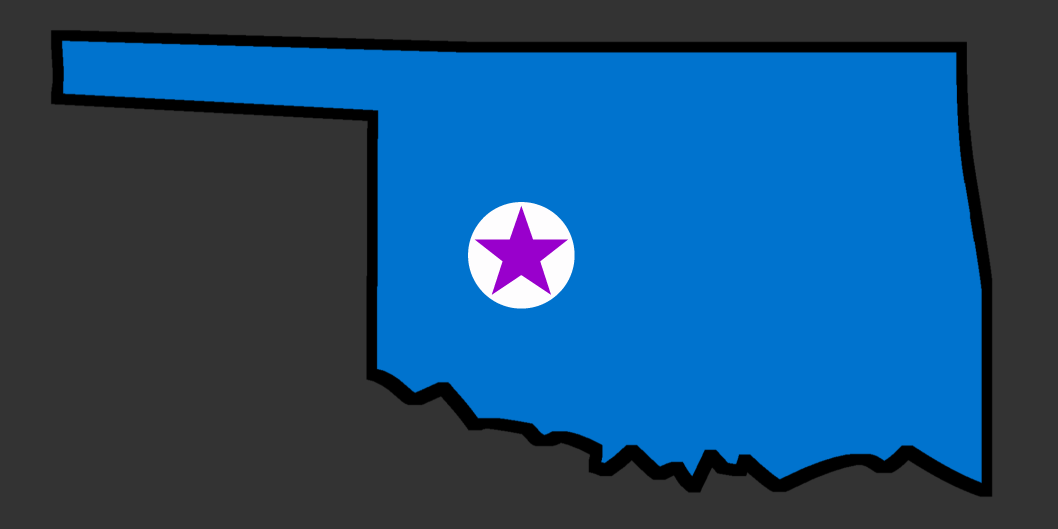
<style>
.page{position:relative;width:1058px;height:529px;background:#333333}
.page>*{position:absolute;margin:0}
.t1{font:146.7px "SegoeUISymbol";color:#fefdfe}
</style>
<div class="page">
<p class="t1" style="left:468px;top:202px;width:107px;height:107px">✪</p>
</div>
